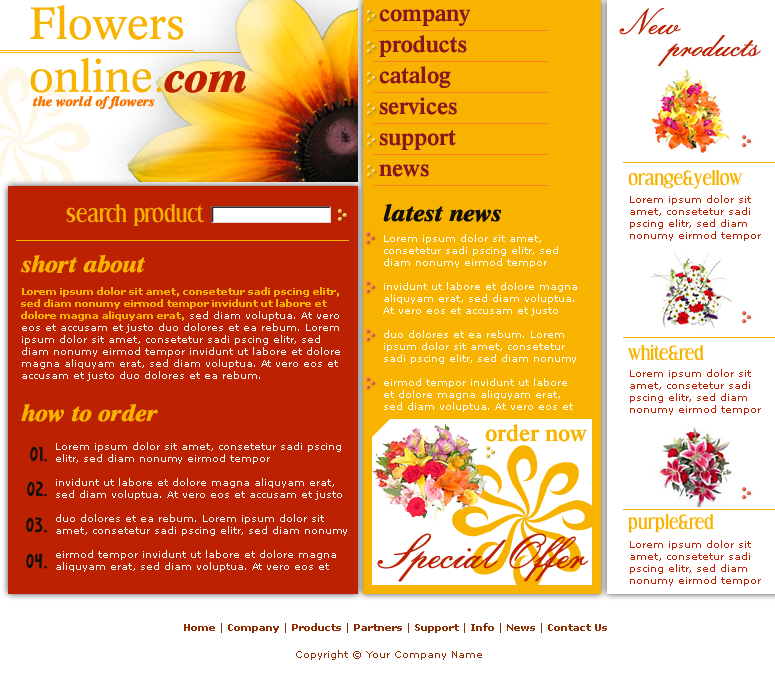
<style>
.page{position:relative;width:775px;height:683px;background:#ffffff}
.page>*{position:absolute;margin:0}
.t1{font:44px "Dutch809BT-RomanC";color:#f8b200}
.t2{font:44px "Dutch801BT-ExtraBoldItalic";color:#bc2102}
.t3{font:24px "Dutch801BT-SemiBold";color:#881522}
.t4{font:35px/22px "EmbassyBT-Regular";letter-spacing:-0.02em;color:#bc2102}
.t5{font:14px "Dutch801BT-ExtraBoldItalic";color:#f87402}
.t6{font:20px "Effloresce";color:#f8b200}
.t7{font:10px "Verdana";color:#bc2102}
.t8{font:24px "Effloresce";color:#f8b200}
.t9{font:24px "Dutch801BT-ExtraBoldItalic";color:#130f0c}
.t10{font:10px "Verdana";color:#ffffff}
.t11{font:24px "Dutch801BT-ExtraBoldItalic";color:#f8b200}
.t12{font:10px "Verdana-Bold";color:#f8b200}
.t13{font:24px "Dutch801BT-SemiBold";color:#f8b200}
.t14{font:24px "Earth's-Mightiest";color:#130f0c}
.t15{font:47px "EmbassyBT-Regular";letter-spacing:-0.02em;color:#bc2102}
.t16{font:10px "Verdana-Bold";color:#8d2f02}
.t17{font:10px "Verdana";color:#8d2f02}
</style>
<div class="page">
<p class="t1" style="left:30px;top:5px;width:217px;height:88px">Flowers<br>online.<span class="t2">com</span></p>
<p class="t3" style="left:379px;top:9px;width:92px;height:17px">company</p>
<p class="t4" style="left:619px;top:8px;width:142px;height:58px">New<br>      products</p>
<p class="t3" style="left:379px;top:35px;width:88px;height:22px">products</p>
<p class="t3" style="left:379px;top:66px;width:72px;height:22px">catalog</p>
<p class="t5" style="left:33px;top:96px;width:122px;height:13px">the world of flowers</p>
<p class="t3" style="left:379px;top:97px;width:78px;height:18px">services</p>
<p class="t3" style="left:379px;top:130px;width:77px;height:20px">support</p>
<p class="t3" style="left:379px;top:164px;width:50px;height:13px">news</p>
<p class="t6" style="left:628px;top:170px;width:115px;height:19px">orange&amp;yellow</p>
<p class="t7" style="left:630px;top:195px;width:131px;height:46px">Lorem ipsum dolor sit amet, consetetur sadi pscing elitr, sed diam nonumy eirmod tempor</p>
<p class="t8" style="left:66px;top:204px;width:139px;height:22px">search product</p>
<p class="t9" style="left:383px;top:204px;width:119px;height:18px">latest news</p>
<p class="t10" style="left:383px;top:234px;width:194px;height:178px">Lorem ipsum dolor sit amet, consetetur sadi pscing elitr, sed diam nonumy eirmod tempor <br><br>invidunt ut labore et dolore magna aliquyam erat, sed diam voluptua. At vero eos et accusam et justo <br><br>duo dolores et ea rebum. Lorem ipsum dolor sit amet, consetetur sadi pscing elitr, sed diam nonumy <br><br>eirmod tempor invidunt ut labore et dolore magna aliquyam erat, sed diam voluptua. At vero eos et</p>
<p class="t11" style="left:21px;top:255px;width:125px;height:18px">short about</p>
<p class="t10" style="left:21px;top:287px;width:319px;height:94px"><span class="t12">Lorem ipsum dolor sit amet, consetetur sadi pscing elitr, sed diam nonumy eirmod tempor invidunt ut labore et dolore magna aliquyam erat,</span> sed diam voluptua. At vero eos et accusam et justo duo dolores et ea rebum. Lorem ipsum dolor sit amet, consetetur sadi pscing elitr, sed diam nonumy eirmod tempor invidunt ut labore et dolore magna aliquyam erat, sed diam voluptua. At vero eos et accusam et justo duo dolores et ea rebum.</p>
<p class="t6" style="left:627px;top:344px;width:77px;height:17px">white&amp;red</p>
<p class="t7" style="left:630px;top:369px;width:131px;height:46px">Lorem ipsum dolor sit amet, consetetur sadi pscing elitr, sed diam nonumy eirmod tempor</p>
<p class="t11" style="left:21px;top:404px;width:137px;height:18px">how to order</p>
<p class="t13" style="left:485px;top:424px;width:102px;height:18px">order now</p>
<p class="t14" style="left:30px;top:446px;width:17px;height:16px">01.</p>
<p class="t10" style="left:56px;top:442px;width:291px;height:130px">Lorem ipsum dolor sit amet, consetetur sadi pscing elitr, sed diam nonumy eirmod tempor <br><br>invidunt ut labore et dolore magna aliquyam erat, sed diam voluptua. At vero eos et accusam et justo <br><br>duo dolores et ea rebum. Lorem ipsum dolor sit amet, consetetur sadi pscing elitr, sed diam nonumy <br><br>eirmod tempor invidunt ut labore et dolore magna aliquyam erat, sed diam voluptua. At vero eos et</p>
<p class="t14" style="left:27px;top:481px;width:20px;height:16px">02.</p>
<p class="t14" style="left:26px;top:517px;width:21px;height:16px">03.</p>
<p class="t6" style="left:628px;top:514px;width:86px;height:19px">purple&amp;red</p>
<p class="t15" style="left:377px;top:533px;width:211px;height:49px">Special Offer</p>
<p class="t7" style="left:630px;top:540px;width:131px;height:46px">Lorem ipsum dolor sit amet, consetetur sadi pscing elitr, sed diam nonumy eirmod tempor</p>
<p class="t14" style="left:26px;top:553px;width:21px;height:16px">04.</p>
<p class="t16" style="left:184px;top:623px;width:423px;height:10px"><span class="t17">  </span>Home | Company | Products | Partners | Support | Info | News | Contact Us</p>
<p class="t17" style="left:296px;top:650px;width:186px;height:10px">Copyright © Your Company Name</p>
</div>
